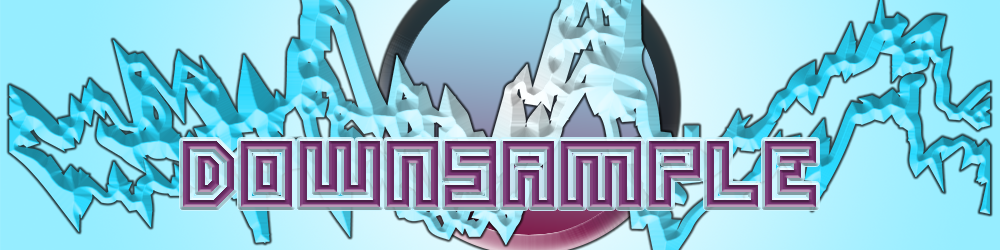
<style>
.page{position:relative;width:1000px;height:250px}
.page>*{position:absolute;margin:0}
.t1{font:112.8px "Unlearned2BRK"}
</style>
<div class="page">
<p class="t1" style="left:183px;top:141px;width:633px;height:66px">DOWNSAMPLE</p>
</div>
